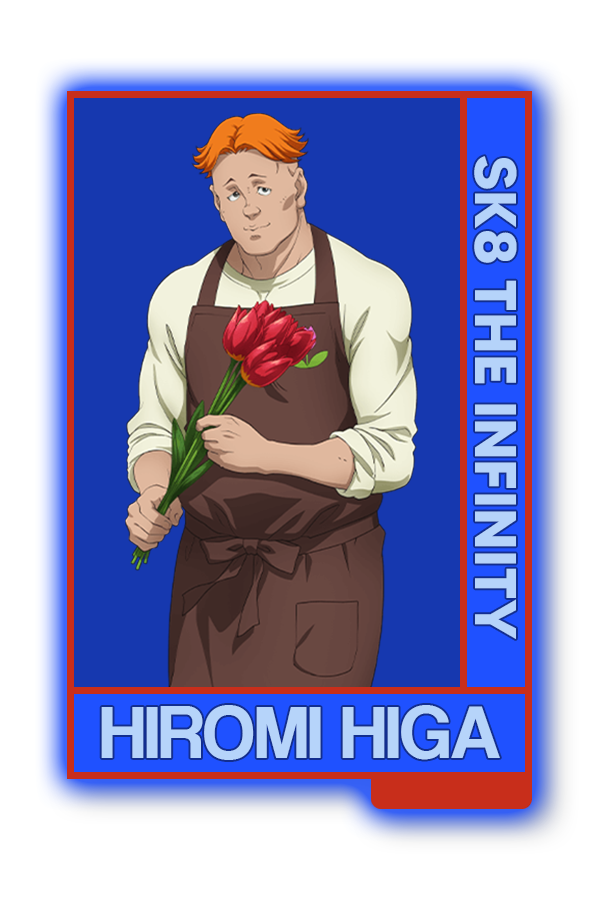
<style>
.page{position:relative;width:600px;height:900px;background:#ffffff}
.page>*{position:absolute;margin:0}
.t1{font:58.4px "MADETOMMY-Bold";color:#b5d3fa}
.t2{font:76.7px "CoolveticaRg-Regular";color:#b6d4fa}
</style>
<div class="page">
<p class="t1" style="left:474px;top:156px;width:43px;height:483px;rotate:90deg">SK8 THE INFINITY</p>
<p class="t2" style="left:101px;top:705px;width:399px;height:55px">HIROMI HIGA</p>
</div>
